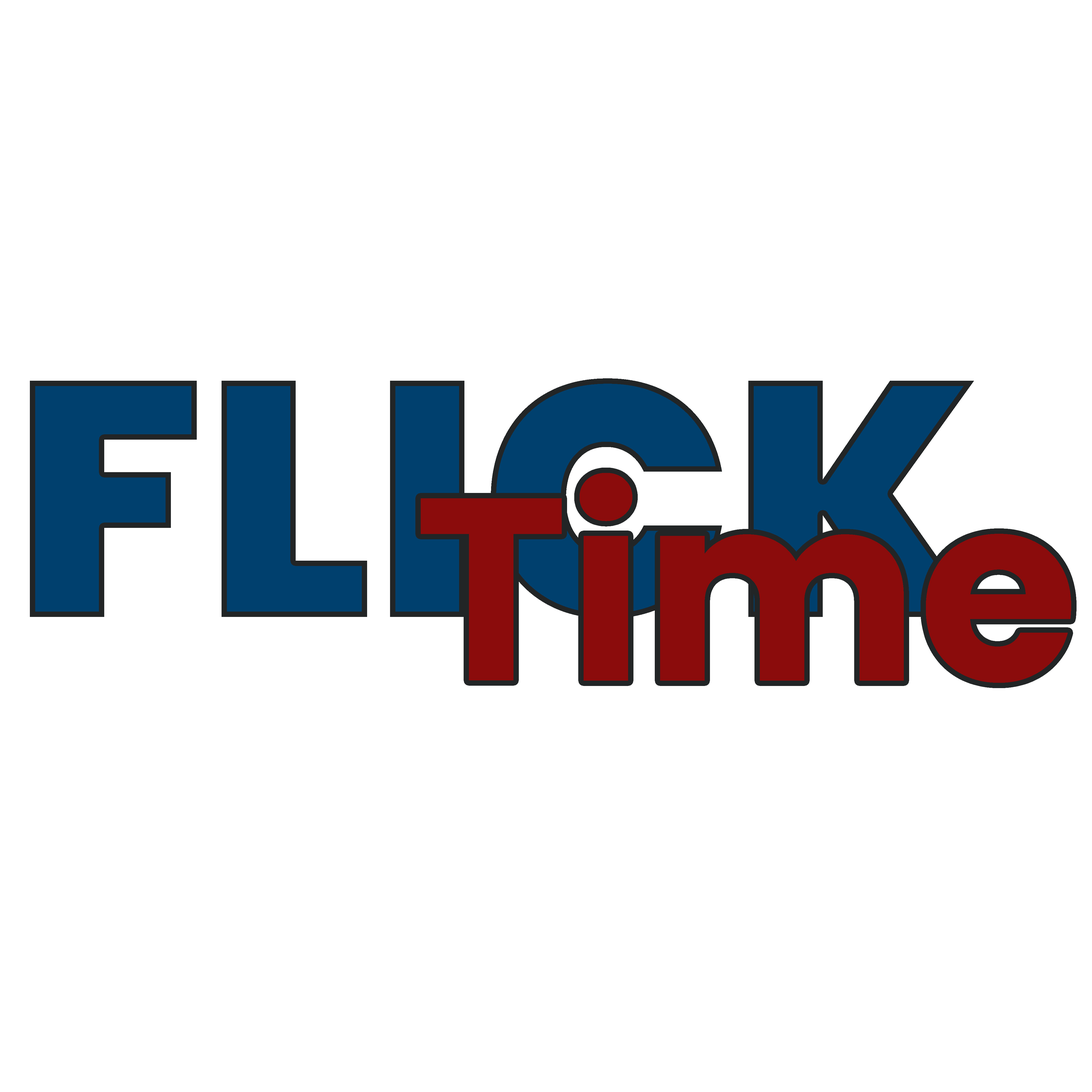
<style>
.page{position:relative;width:1092px;height:1092px;background:#ffffff}
.page>*{position:absolute;margin:0}
.t1{font:333.2px "Poppins-Black";color:#00406e}
.t2{font:259.2px "Poppins-Bold";color:#8b0c0c}
</style>
<div class="page">
<p class="t1" style="left:30px;top:378px;width:949px;height:241px">FLICK</p>
<p class="t2" style="left:421px;top:473px;width:650px;height:210px">Time</p>
</div>
